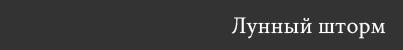
<style>
.page{position:relative;width:403px;height:50px;background:#333333}
.page>*{position:absolute;margin:0}
.t1{font:24px "CrimsonText-Regular";color:#ffffff}
</style>
<div class="page">
<p class="t1" style="left:231px;top:17px;width:155px;height:22px">Лунный шторм</p>
</div>
